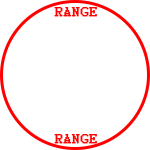
<style>
.page{position:relative;width:150px;height:150px;background:#ffffff}
.page>*{position:absolute;margin:0}
.t1{font:14px "Courier";letter-spacing:0.05em;color:#ff0000;font-weight:bold}
</style>
<div class="page">
<p class="t1" style="left:54px;top:7px;width:43px;height:10px">RANGE</p>
<p class="t1" style="left:54px;top:134px;width:43px;height:10px">RANGE</p>
</div>
